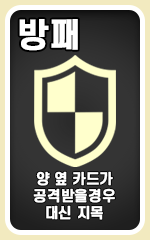
<style>
.page{position:relative;width:150px;height:240px}
.page>*{position:absolute;margin:0}
.t1{font:32.7px "S-CoreDream-6Bold";color:#ffffff;font-weight:bold}
.t2{font:14.1px/17.2px "S-CoreDream-6Bold";color:#ffffff;font-weight:bold}
</style>
<div class="page">
<p class="t1" style="left:19px;top:19px;width:59px;height:32px">방패</p>
<p class="t2" style="left:33px;top:171px;width:82px;height:49px;text-align:center">양 옆 카드가<br>공격받을경우<br>대신 지목</p>
</div>
